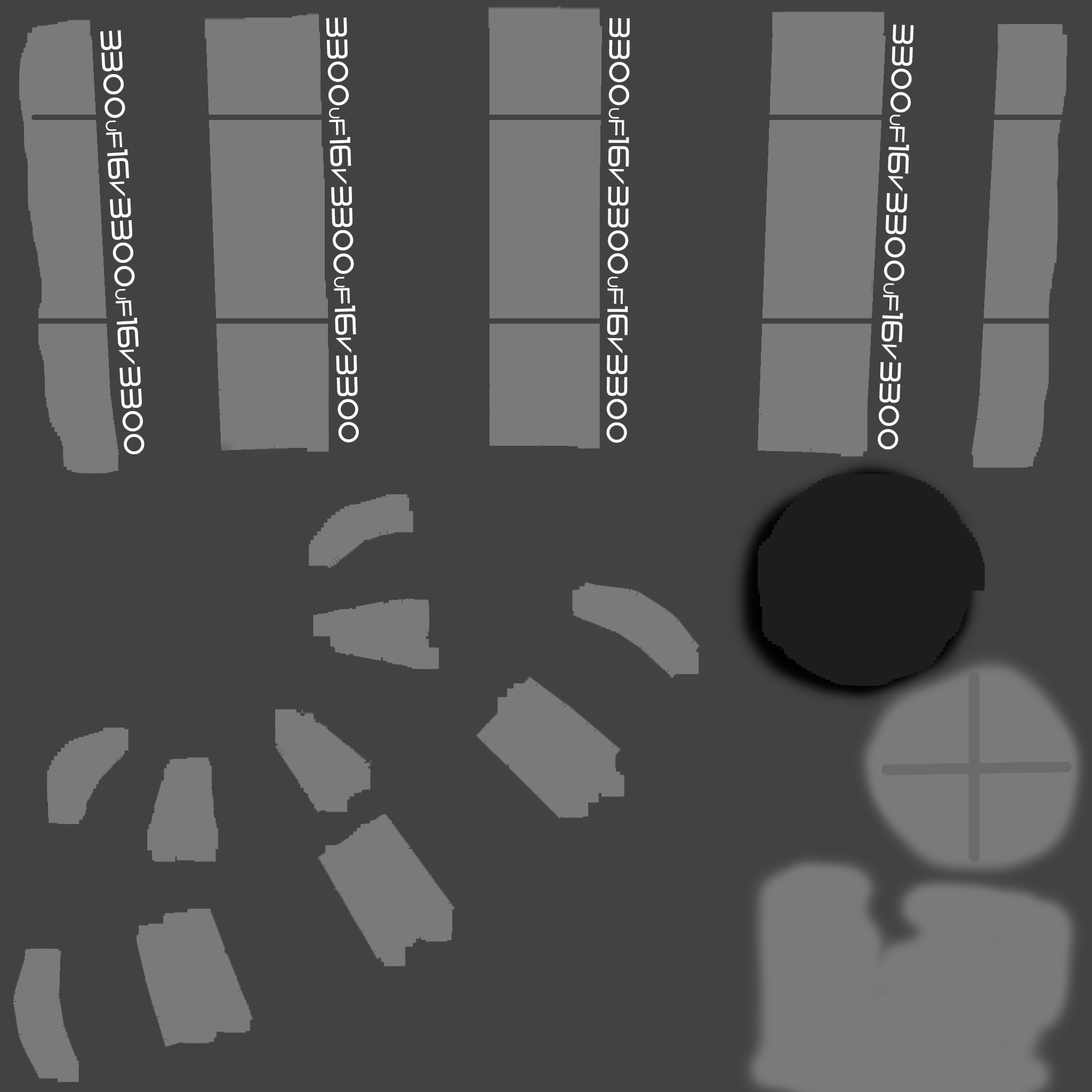
<style>
.page{position:relative;width:1092px;height:1092px;background:#434242}
.page>*{position:absolute;margin:0}
.t1{font:29.8px "VerminVibes2";color:#fefefe}
.t2{font:14.9px "VerminVibes2";color:#fefefe}
.t3{font:22.3px "VerminVibes2";color:#fefefe}
.t4{font:29.8px "VerminVibes2";color:#fcfafa}
.t5{font:14.9px "VerminVibes2";color:#fcfafa}
.t6{font:22.3px "VerminVibes2";color:#fcfafa}
.t7{font:29.8px "VerminVibes2";color:#fbf7f7}
.t8{font:14.9px "VerminVibes2";color:#fbf7f7}
.t9{font:22.3px "VerminVibes2";color:#fbf7f7}
.t10{font:29.8px "VerminVibes2";color:#f9f8f8}
.t11{font:14.9px "VerminVibes2";color:#f9f8f8}
.t12{font:22.3px "VerminVibes2";color:#f9f8f8}
</style>
<div class="page">
<p class="t1" style="left:326px;top:17px;width:33px;height:426px;rotate:88deg">3300<span class="t2">U</span><span class="t3">F</span>16<span class="t3">v</span>3300<span class="t2">u</span><span class="t3">F</span>16<span class="t3">v</span>3300</p>
<p class="t4" style="left:100px;top:30px;width:44px;height:424px;rotate:87deg">3300<span class="t5">U</span><span class="t6">F</span>16<span class="t6">v</span>3300<span class="t5">u</span><span class="t6">F</span>16<span class="t6">v</span>3300</p>
<p class="t7" style="left:606px;top:18px;width:24px;height:425px;rotate:90deg">3300<span class="t8">U</span><span class="t9">F</span>16<span class="t9">v</span>3300<span class="t8">u</span><span class="t9">F</span>16<span class="t9">v</span>3300</p>
<p class="t10" style="left:878px;top:25px;width:36px;height:424px;rotate:92deg">3300<span class="t11">U</span><span class="t12">F</span>16<span class="t12">v</span>3300<span class="t11">u</span><span class="t12">F</span>16<span class="t12">v</span>3300</p>
</div>
